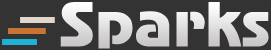
<style>
.page{position:relative;width:271px;height:50px;background:#333333}
.page>*{position:absolute;margin:0}
.t1{font:60px "AdverGothic";color:#f2eded}
</style>
<div class="page">
<p class="t1" style="left:60px;top:2px;width:209px;height:47px">Sparks</p>
</div>
